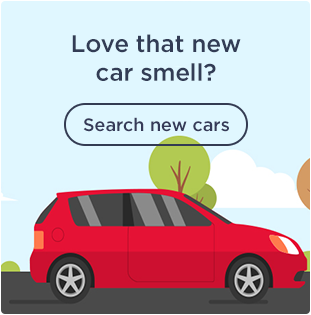
<style>
.page{position:relative;width:311px;height:315px;background:#e0f7ff}
.page>*{position:absolute;margin:0}
.t1{font:24px "Gotham-Medium";color:#323c55}
.t2{font:18px "Gotham-Medium";color:#353a58}
</style>
<div class="page">
<p class="t1" style="left:72px;top:34px;width:169px;height:47px;text-align:center">Love that new<br>car smell?</p>
<p class="t2" style="left:83px;top:117px;width:146px;height:15px">Search new cars</p>
</div>
